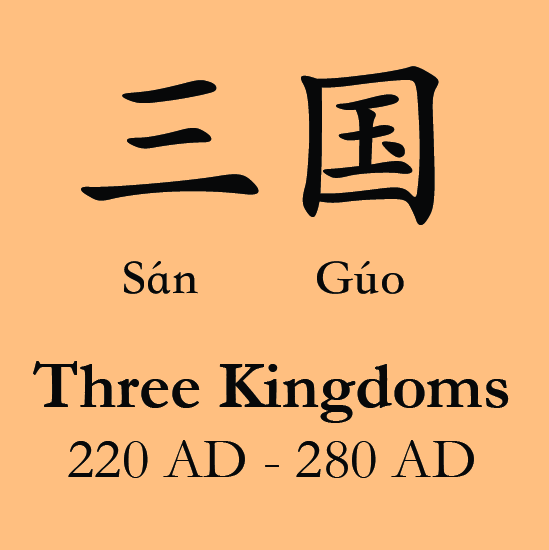
<style>
.page{position:relative;width:549px;height:550px;background:#ffbf80}
.page>*{position:absolute;margin:0}
.t1{font:200px "STKaiti-SC-Bold";color:#070809}
.t2{font:50px "STKaiti-SC-Bold";color:#070809}
.t3{font:58.3px "Garamond";color:#070809}
.t4{font:66.7px "Garamond-Bold";color:#070809}
</style>
<div class="page">
<p class="t1" style="left:81px;top:66px;width:358px;height:159px">三国</p>
<p class="t2" style="left:124px;top:261px;width:74px;height:33px">Sán</p>
<p class="t2" style="left:317px;top:261px;width:87px;height:33px">Gúo</p>
<p class="t3" style="left:33px;top:361px;width:476px;height:117px;text-align:center"><span class="t4">Three Kingdoms<br></span>220 AD - 280 AD</p>
</div>
